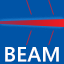
<style>
.page{position:relative;width:64px;height:64px;background:#0054a6}
.page>*{position:absolute;margin:0}
.t1{font:20.8px "SegoeUI-Semibold";color:#ffffff}
</style>
<div class="page">
<p class="t1" style="left:5px;top:47px;width:54px;height:15px">BEAM</p>
</div>
